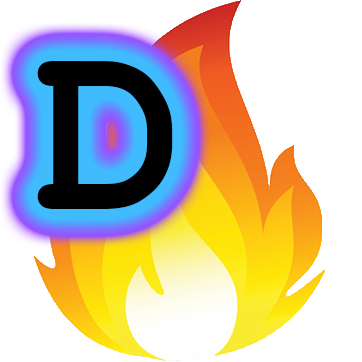
<style>
.page{position:relative;width:362px;height:362px;background:#ffffff}
.page>*{position:absolute;margin:0}
.t1{font:250px "CourierNewPS-BoldMT";color:#000000}
</style>
<div class="page">
<p class="t1" style="left:37px;top:61px;width:136px;height:148px">D</p>
</div>
